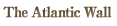
<style>
.page{position:relative;width:117px;height:26px;background:#ffffff}
.page>*{position:absolute;margin:0}
.t1{font:14px "RyuminPro-ExBold";letter-spacing:-0.08em;color:#69553d;font-weight:bold}
</style>
<div class="page">
<p class="t1" style="left:3px;top:6px;width:109px;height:12px">The Atlantic Wall</p>
</div>
